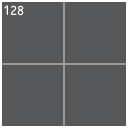
<style>
.page{position:relative;width:128px;height:128px;background:#565758}
.page>*{position:absolute;margin:0}
.t1{font:12px "OCR-B-Regular";letter-spacing:-0.075em;color:#fefefe}
</style>
<div class="page">
<p class="t1" style="left:4px;top:5px;width:20px;height:11px">128</p>
</div>
